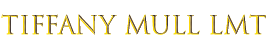
<style>
.page{position:relative;width:267px;height:51px;background:#ffffff}
.page>*{position:absolute;margin:0}
.t1{font:25px "TrajanColor-Concept"}
</style>
<div class="page">
<p class="t1" style="left:1px;top:14px;width:265px;height:21px">Tiffany Mull LMT</p>
</div>
